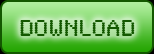
<style>
.page{position:relative;width:154px;height:54px}
.page>*{position:absolute;margin:0}
.t1{font:24px "SynchroLET";color:#135800}
</style>
<div class="page">
<p class="t1" style="left:20px;top:20px;width:115px;height:16px">Download</p>
</div>
